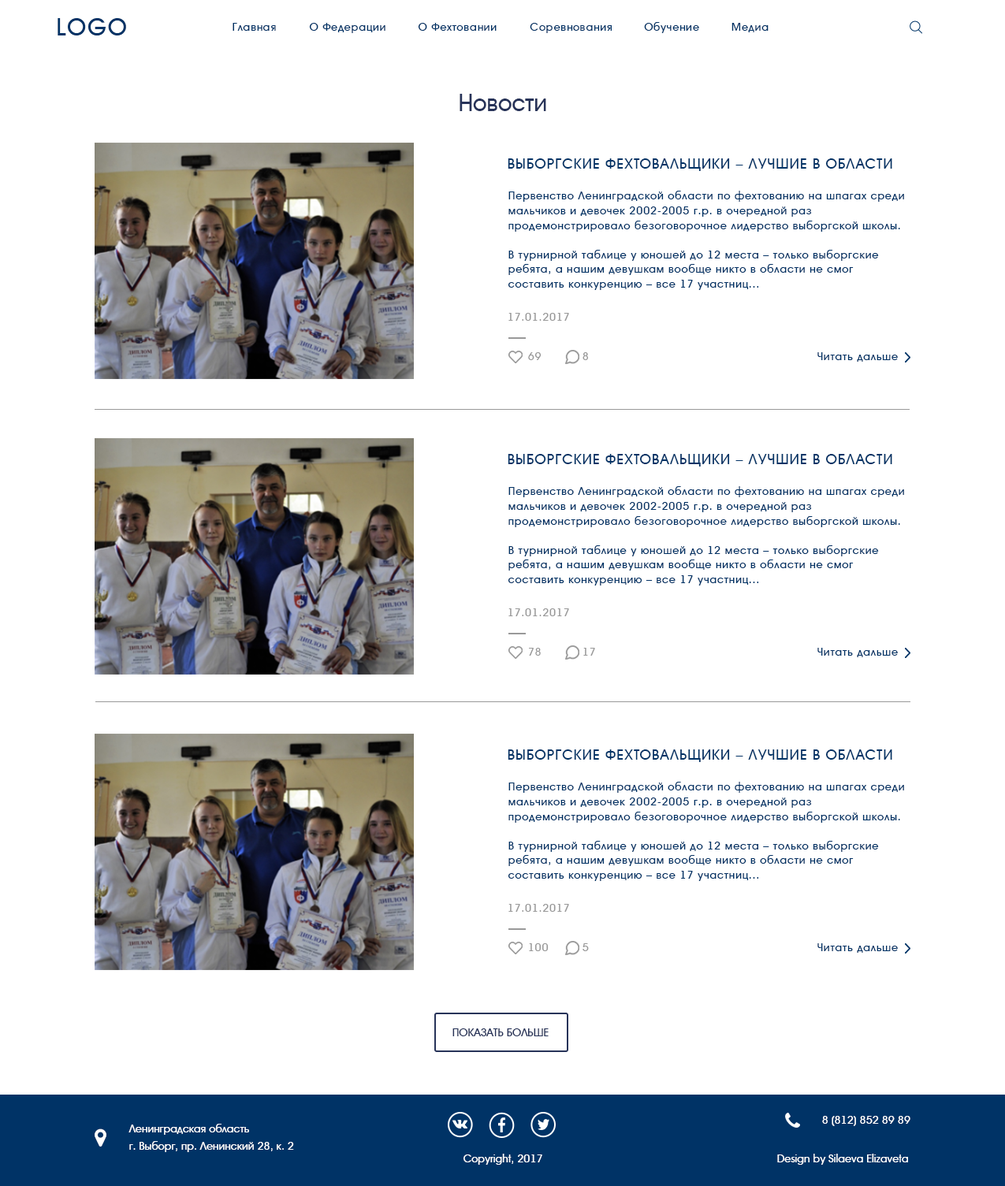
<style>
.page{position:relative;width:1005px;height:1186px;background:#ffffff}
.page>*{position:absolute;margin:0}
.t1{font:23.6px "AAvanteBs";letter-spacing:0.06em;color:#003366}
.t2{font:11px "AAvanteBs";letter-spacing:0.06em;color:#003366}
.t3{font:23.6px "AAvanteBs";color:#273359}
.t4{font:14.2px "AAvanteBs";letter-spacing:0.06em;color:#003366;text-transform:uppercase}
.t5{font:11px/14.7px "AAvanteBs";letter-spacing:0.06em;color:#003366}
.t6{font:11px "AAvanteBs";letter-spacing:0.05em;color:#999999}
.t7{font:11px "AAvanteBs";letter-spacing:0.06em;color:#999999}
.t8{font:11px "AAvanteBs";color:#273359;text-transform:uppercase}
.t9{font:11px "AAvanteBs";color:#ffffff}
.t10{font:11px/17.1px "AAvanteBs";color:#ffffff}
</style>
<div class="page">
<p class="t1" style="left:58px;top:18px;width:68px;height:17px">LOGO</p>
<p class="t2" style="left:233px;top:23px;width:43px;height:8px">Главная</p>
<p class="t2" style="left:309px;top:23px;width:76px;height:10px">О Федерации</p>
<p class="t2" style="left:418px;top:23px;width:79px;height:8px">О Фехтовании</p>
<p class="t2" style="left:530px;top:23px;width:82px;height:10px">Соревнования</p>
<p class="t2" style="left:644px;top:22px;width:55px;height:11px">Обучение</p>
<p class="t2" style="left:732px;top:23px;width:37px;height:9px">Медиа</p>
<p class="t3" style="left:460px;top:94px;width:86px;height:17px">Новости</p>
<p class="t4" style="left:508px;top:158px;width:384px;height:13px">ВЫБОРГСКИЕ ФЕХТОВАЛЬЩИКИ – ЛУЧШИЕ В ОБЛАСТИ</p>
<p class="t5" style="left:508px;top:191px;width:396px;height:99px;text-align:right">Первенство Ленинградской области по фехтованию на шпагах среди мальчиков и девочек 2002-2005 г.р. в очередной раз продемонстрировало безоговорочное лидерство выборгской школы. <br><br>В турнирной таблице у юношей до 12 места – только выборгские ребята, а нашим девушкам вообще никто в области не смог составить конкуренцию – все 17 участниц...</p>
<p class="t6" style="left:508px;top:313px;width:61px;height:8px">17.01.2017</p>
<p class="t7" style="left:528px;top:352px;width:14px;height:8px">69</p>
<p class="t7" style="left:583px;top:352px;width:5px;height:8px">8</p>
<p class="t2" style="left:817px;top:352px;width:81px;height:10px">Читать дальше</p>
<p class="t4" style="left:508px;top:454px;width:384px;height:13px">ВЫБОРГСКИЕ ФЕХТОВАЛЬЩИКИ – ЛУЧШИЕ В ОБЛАСТИ</p>
<p class="t5" style="left:508px;top:486px;width:396px;height:100px;text-align:right">Первенство Ленинградской области по фехтованию на шпагах среди мальчиков и девочек 2002-2005 г.р. в очередной раз продемонстрировало безоговорочное лидерство выборгской школы. <br><br>В турнирной таблице у юношей до 12 места – только выборгские ребята, а нашим девушкам вообще никто в области не смог составить конкуренцию – все 17 участниц...</p>
<p class="t6" style="left:508px;top:609px;width:61px;height:7px">17.01.2017</p>
<p class="t7" style="left:529px;top:648px;width:12px;height:8px">78</p>
<p class="t7" style="left:583px;top:648px;width:12px;height:8px">17</p>
<p class="t2" style="left:817px;top:648px;width:81px;height:9px">Читать дальше</p>
<p class="t4" style="left:508px;top:750px;width:384px;height:12px">ВЫБОРГСКИЕ ФЕХТОВАЛЬЩИКИ – ЛУЧШИЕ В ОБЛАСТИ</p>
<p class="t5" style="left:508px;top:782px;width:396px;height:99px;text-align:right">Первенство Ленинградской области по фехтованию на шпагах среди мальчиков и девочек 2002-2005 г.р. в очередной раз продемонстрировало безоговорочное лидерство выборгской школы. <br><br>В турнирной таблице у юношей до 12 места – только выборгские ребята, а нашим девушкам вообще никто в области не смог составить конкуренцию – все 17 участниц...</p>
<p class="t6" style="left:508px;top:904px;width:61px;height:8px">17.01.2017</p>
<p class="t7" style="left:529px;top:944px;width:20px;height:7px">100</p>
<p class="t7" style="left:583px;top:944px;width:6px;height:7px">5</p>
<p class="t2" style="left:817px;top:944px;width:81px;height:9px">Читать дальше</p>
<p class="t8" style="left:452px;top:1029px;width:97px;height:8px">пОКАЗАТЬ БОЛЬШЕ</p>
<p class="t9" style="left:822px;top:1116px;width:88px;height:10px">8 (812) 852 89 89</p>
<p class="t10" style="left:128px;top:1124px;width:166px;height:29px">Ленинградская область<br>г. Выборг, пр. Ленинский 28, к. 2</p>
<p class="t9" style="left:464px;top:1154px;width:78px;height:11px">Copyright, 2017</p>
<p class="t9" style="left:777px;top:1154px;width:131px;height:11px">Design by Silaeva Elizaveta</p>
</div>
